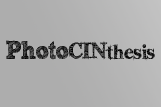
<style>
.page{position:relative;width:161px;height:107px;background:#adadad}
.page>*{position:absolute;margin:0}
.t1{font:25.7px "SketchRockwell";letter-spacing:-0.05em;color:#010101;scale:0.9 1}
.t2{font:21.9px "FFFTusj-Bold";color:#010101;scale:0.9 1}
.t3{font:25.7px "karabinE.";color:#000000;scale:0.9 1}
</style>
<div class="page">
<p class="t1" style="left:6px;top:40px;width:63px;height:20px">Photo</p>
<p class="t2" style="left:68px;top:41px;width:40px;height:19px">CIN</p>
<p class="t3" style="left:105px;top:44px;width:50px;height:17px">thesis</p>
</div>
